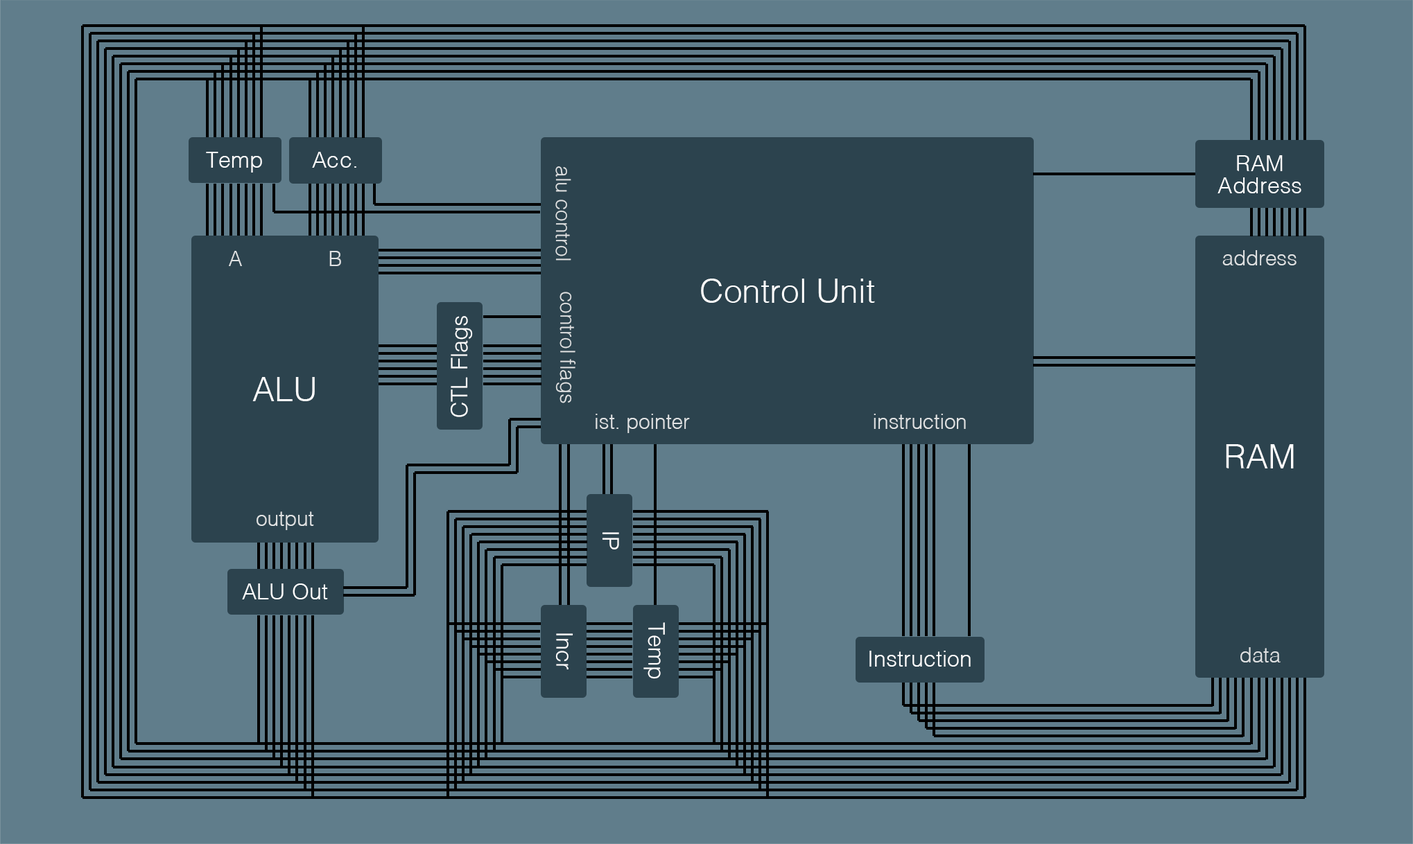
<style>
.page{position:relative;width:1413px;height:844px;background:#607d8b}
.page>*{position:absolute;margin:0}
.t1{font:22.5px "Helvetica-Light";color:#ffffff}
.t2{font:22.5px/22.5px "Helvetica-Light";color:#ffffff}
.t3{font:20.5px "Helvetica-Light";color:#e0e2e3}
.t4{font:33.2px "Helvetica-Light";color:#ffffff}
</style>
<div class="page">
<p class="t1" style="left:206px;top:152px;width:56px;height:21px">Temp</p>
<p class="t1" style="left:312px;top:152px;width:44px;height:16px">Acc.</p>
<p class="t2" style="left:1217px;top:155px;width:84px;height:38px;text-align:center">RAM<br>Address</p>
<p class="t3" style="left:555px;top:166px;width:16px;height:95px;rotate:90deg">alu control</p>
<p class="t3" style="left:229px;top:251px;width:13px;height:15px">A</p>
<p class="t3" style="left:329px;top:251px;width:12px;height:15px">B</p>
<p class="t3" style="left:1222px;top:250px;width:74px;height:15px">address</p>
<p class="t4" style="left:701px;top:279px;width:174px;height:24px">Control Unit</p>
<p class="t3" style="left:555px;top:292px;width:21px;height:111px;rotate:90deg">control flags</p>
<p class="t1" style="left:450px;top:316px;width:23px;height:101px;rotate:-90deg">CTL Flags</p>
<p class="t4" style="left:252px;top:377px;width:63px;height:24px">ALU</p>
<p class="t3" style="left:595px;top:414px;width:95px;height:19px">ist. pointer</p>
<p class="t3" style="left:873px;top:414px;width:92px;height:15px">instruction</p>
<p class="t4" style="left:1225px;top:444px;width:68px;height:25px">RAM</p>
<p class="t3" style="left:256px;top:512px;width:58px;height:18px">output</p>
<p class="t1" style="left:602px;top:532px;width:17px;height:18px;rotate:90deg">IP</p>
<p class="t1" style="left:242px;top:584px;width:86px;height:16px">ALU Out</p>
<p class="t1" style="left:643px;top:622px;width:22px;height:57px;rotate:90deg">Temp</p>
<p class="t1" style="left:555px;top:633px;width:18px;height:37px;rotate:90deg">Incr</p>
<p class="t1" style="left:869px;top:651px;width:101px;height:16px">Instruction</p>
<p class="t3" style="left:1240px;top:647px;width:40px;height:16px">data</p>
</div>
